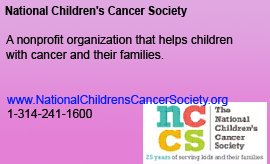
<style>
.page{position:relative;width:270px;height:164px}
.page>*{position:absolute;margin:0}
.t1{font:12px "Arial-BoldMT";color:#000000;scale:0.91 1}
.t2{font:12px "ArialMT";color:#000000}
.t3{font:12px "ArialMT";color:#001eff}
</style>
<div class="page">
<p class="t1" style="left:5px;top:6px;width:182px;height:11px">National Children's Cancer Society</p>
<p class="t2" style="left:6px;top:35px;width:227px;height:11px">A nonprofit organization that helps children</p>
<p class="t2" style="left:6px;top:50px;width:158px;height:9px">with cancer and their families.</p>
<p class="t3" style="left:7px;top:95px;width:221px;height:11px">www.NationalChildrensCancerSociety.org</p>
<p class="t2" style="left:8px;top:109px;width:84px;height:9px">1-314-241-1600</p>
</div>
